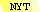
<style>
.page{position:relative;width:40px;height:12px}
.page>*{position:absolute;margin:0}
.t1{font:11px "Courier";color:#000000}
</style>
<div class="page">
<p class="t1" style="left:10px;top:3px;width:20px;height:7px">NYT</p>
</div>
